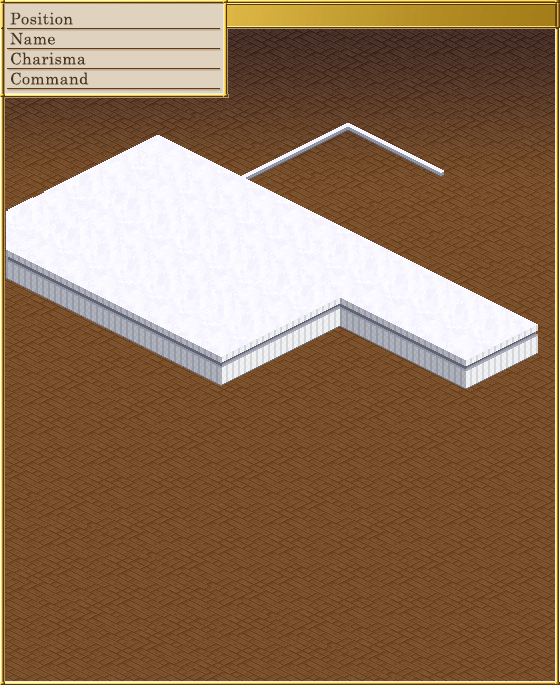
<style>
.page{position:relative;width:560px;height:685px}
.page>*{position:absolute;margin:0}
.t1{font:16px "CenturySchoolbook";letter-spacing:0.025em;color:#4b3620}
</style>
<div class="page">
<p class="t1" style="left:10px;top:12px;width:63px;height:13px">Position</p>
<p class="t1" style="left:10px;top:32px;width:45px;height:13px">Name</p>
<p class="t1" style="left:11px;top:52px;width:75px;height:13px">Charisma</p>
<p class="t1" style="left:11px;top:72px;width:78px;height:13px">Command</p>
</div>
